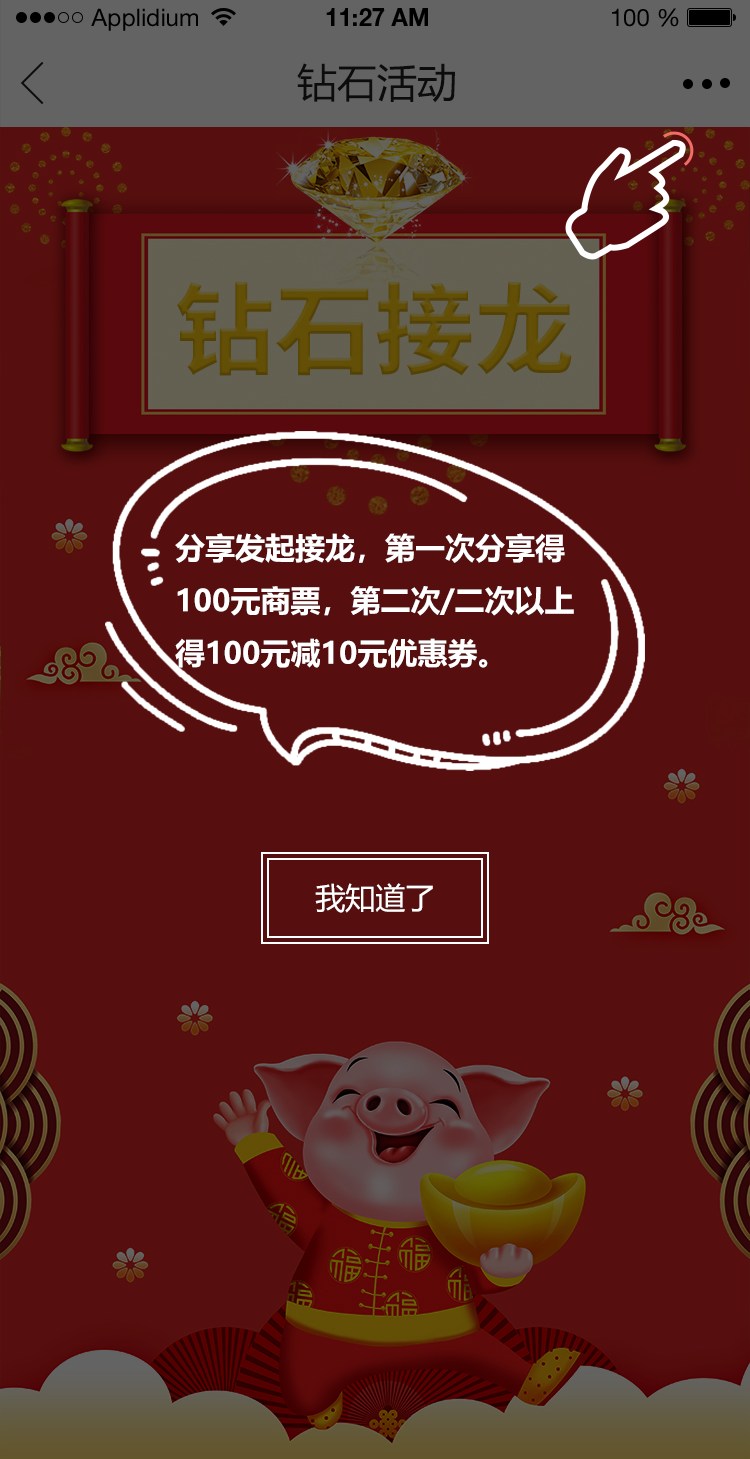
<style>
.page{position:relative;width:750px;height:1459px;background:#560f0e}
.page>*{position:absolute;margin:0}
.t1{font:24px "HelveticaNeueLTStd-Roman";color:#000000}
.t2{font:24px "HelveticaNeueLTStd-Bd";color:#000000}
.t3{font:40px "MicrosoftYaHei";color:#202020;text-transform:uppercase}
.t4{font:30px "MicrosoftYaHei-Bold";color:#ffffff;text-transform:uppercase}
.t5{font:30px "MicrosoftYaHei";color:#ffffff;text-transform:uppercase}
</style>
<div class="page">
<p class="t1" style="left:91px;top:8px;width:107px;height:23px">Applidium</p>
<p class="t2" style="left:326px;top:8px;width:102px;height:18px">11:27 AM</p>
<p class="t1" style="left:612px;top:8px;width:67px;height:19px">100 %</p>
<p class="t3" style="left:297px;top:63px;width:158px;height:40px">钻石活动</p>
<p class="t4" style="left:175px;top:533px;width:399px;height:135px">分享发起接龙，第一次分享得<br>100元商票，第二次/二次以上<br>得100元减10元优惠券。</p>
<p class="t5" style="left:315px;top:883px;width:118px;height:30px">我知道了</p>
</div>
